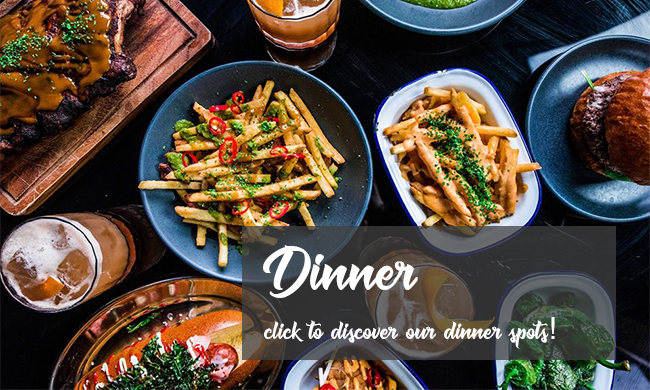
<style>
.page{position:relative;width:650px;height:390px}
.page>*{position:absolute;margin:0}
.t1{font:70px "Muskaters";color:#ffffff}
.t2{font:30px "Muskaters";color:#ffffff}
.t3{font:30px "Helvetica";color:#ffffff}
</style>
<div class="page">
<p class="t1" style="left:263px;top:245px;width:155px;height:53px">Dinner</p>
<p class="t2" style="left:264px;top:317px;width:291px;height:32px">click to discover our dinner spots<span class="t3">!</span></p>
</div>
